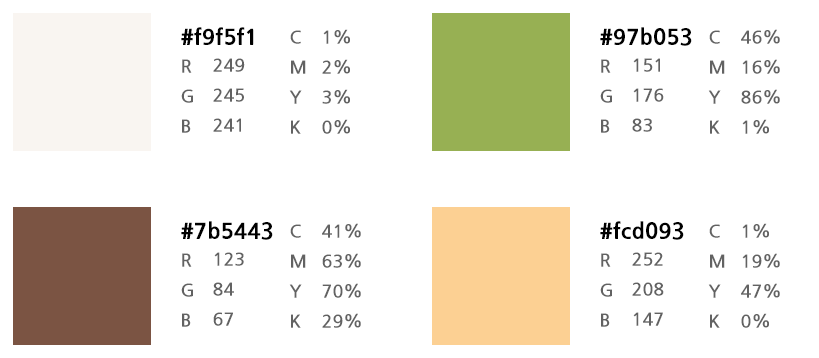
<style>
.page{position:relative;width:819px;height:358px;background:#ffffff}
.page>*{position:absolute;margin:0}
.t1{font:22px "NanumGothicExtraBold";color:#000000}
.t2{font:18px/30px "NanumGothicBold";color:#626262}
</style>
<div class="page">
<p class="t1" style="left:181px;top:27px;width:73px;height:18px">#f9f5f1</p>
<p class="t2" style="left:289px;top:30px;width:17px;height:104px">C<br>M<br>Y<br>K</p>
<p class="t2" style="left:322px;top:29px;width:28px;height:105px">1%<br>2%<br>3%<br>0%</p>
<p class="t1" style="left:600px;top:27px;width:92px;height:19px">#97b053</p>
<p class="t2" style="left:708px;top:30px;width:17px;height:104px">C<br>M<br>Y<br>K</p>
<p class="t2" style="left:741px;top:29px;width:39px;height:105px">46%<br>16%<br>86%<br>1%</p>
<p class="t2" style="left:181px;top:59px;width:12px;height:74px">R<br>G<br>B</p>
<p class="t2" style="left:213px;top:58px;width:32px;height:74px">249<br>245<br>241</p>
<p class="t2" style="left:600px;top:59px;width:12px;height:74px">R<br>G<br>B</p>
<p class="t2" style="left:632px;top:58px;width:32px;height:74px">151<br>176<br>83</p>
<p class="t1" style="left:181px;top:221px;width:92px;height:19px">#7b5443</p>
<p class="t1" style="left:600px;top:221px;width:84px;height:19px">#fcd093</p>
<p class="t2" style="left:289px;top:224px;width:17px;height:104px">C<br>M<br>Y<br>K</p>
<p class="t2" style="left:322px;top:223px;width:39px;height:105px">41%<br>63%<br>70%<br>29%</p>
<p class="t2" style="left:708px;top:224px;width:17px;height:104px">C<br>M<br>Y<br>K</p>
<p class="t2" style="left:741px;top:223px;width:39px;height:105px">1%<br>19%<br>47%<br>0%</p>
<p class="t2" style="left:181px;top:253px;width:12px;height:74px">R<br>G<br>B</p>
<p class="t2" style="left:213px;top:252px;width:31px;height:74px">123<br>84<br>67</p>
<p class="t2" style="left:600px;top:253px;width:12px;height:74px">R<br>G<br>B</p>
<p class="t2" style="left:632px;top:252px;width:32px;height:74px">252<br>208<br>147</p>
</div>
